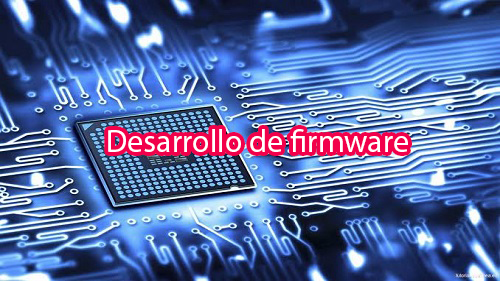
<style>
.page{position:relative;width:500px;height:281px}
.page>*{position:absolute;margin:0}
.t1{font:32px "MyriadPro-Regular";color:#ffffff}
</style>
<div class="page">
<p class="t1" style="left:108px;top:129px;width:300px;height:23px">Desarrollo de firmware</p>
</div>
